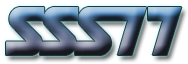
<style>
.page{position:relative;width:188px;height:64px}
.page>*{position:absolute;margin:0}
.t1{font:68px "DeathStar"}
</style>
<div class="page">
<p class="t1" style="left:6px;top:7px;width:176px;height:48px">SSS77</p>
</div>
